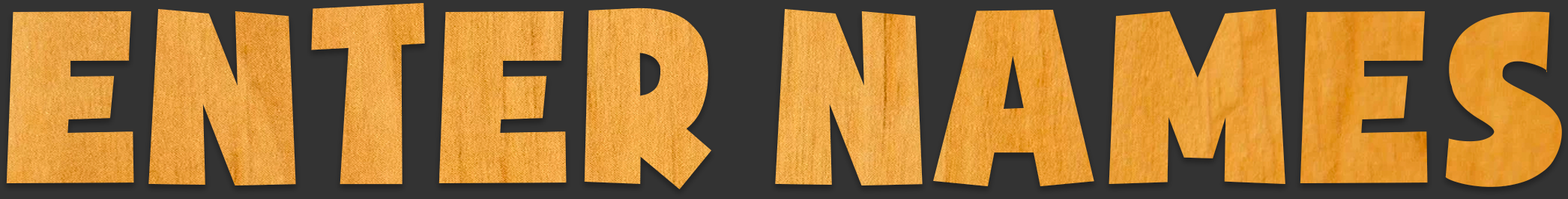
<style>
.page{position:relative;width:1568px;height:199px;background:#333333}
.page>*{position:absolute;margin:0}
.t1{font:281.1px "SoupofJustice";color:#eba13d}
</style>
<div class="page">
<p class="t1" style="left:6px;top:3px;width:1556px;height:186px">ENter names</p>
</div>
